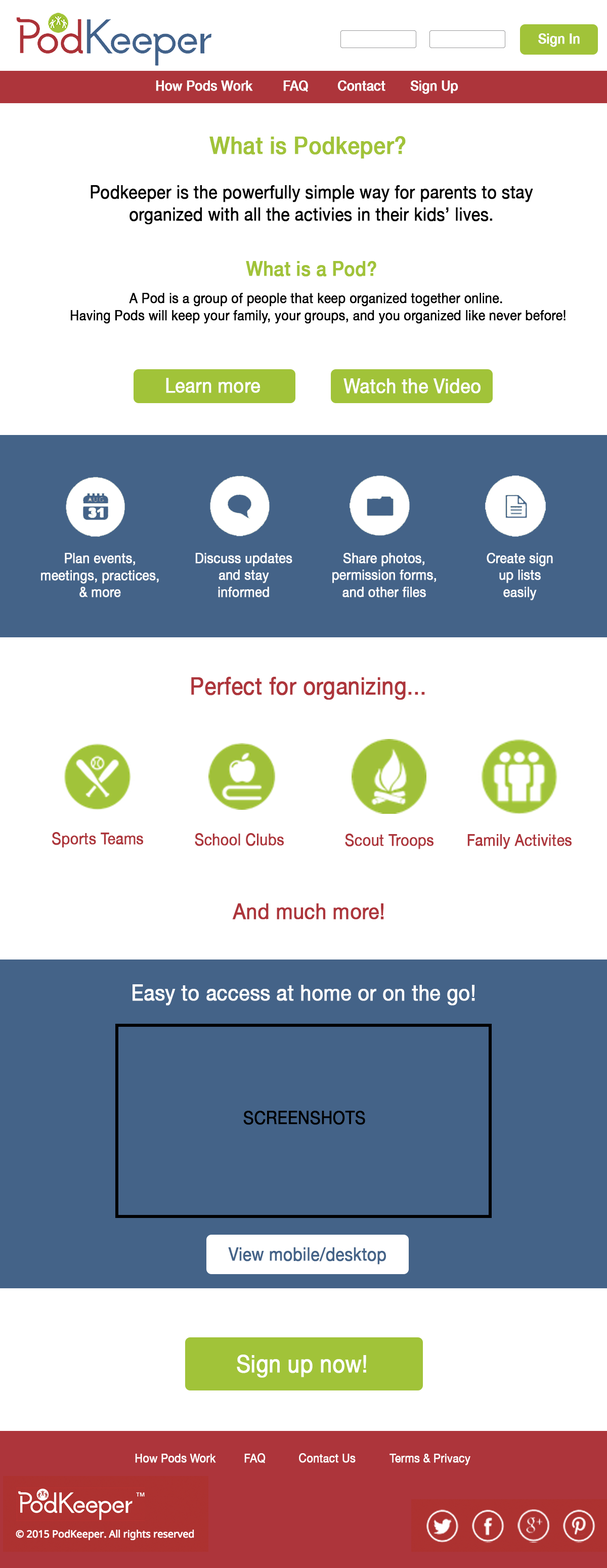
<style>
.page{position:relative;width:607px;height:1568px;background:#ffffff}
.page>*{position:absolute;margin:0}
.t1{font:14.2px "HelveticaNeue-Medium";color:#ffffff;font-weight:bold;scale:0.88 1}
.t2{font:24.3px "HelveticaNeue-Medium";color:#a1c339;font-weight:bold;scale:0.88 1}
.t3{font:18.2px "HelveticaNeue";color:#000000;font-weight:bold;scale:0.88 1}
.t4{font:20.2px "HelveticaNeue-Medium";color:#a1c339;font-weight:bold;scale:0.88 1}
.t5{font:14.2px "HelveticaNeue";color:#000000;font-weight:bold;scale:0.88 1}
.t6{font:20.2px "HelveticaNeue";color:#ffffff;font-weight:bold;scale:0.88 1}
.t7{font:14.2px "HelveticaNeue";color:#ffffff;font-weight:bold;scale:0.88 1}
.t8{font:24.3px "HelveticaNeue";color:#ad353b;font-weight:bold;scale:0.88 1}
.t9{font:16.2px "HelveticaNeue";color:#ad353b;font-weight:bold;scale:0.88 1}
.t10{font:22.3px "HelveticaNeue";color:#ad353b;font-weight:bold;scale:0.88 1}
.t11{font:22.3px "HelveticaNeue";color:#ffffff;font-weight:bold;scale:0.88 1}
.t12{font:18.2px "HelveticaNeue";color:#446388;font-weight:bold;scale:0.88 1}
.t13{font:24.3px "HelveticaNeue";color:#ffffff;font-weight:bold;scale:0.88 1}
.t14{font:12.1px "HelveticaNeue";color:#ffffff;font-weight:bold;scale:0.88 1}
</style>
<div class="page">
<p class="t1" style="left:538px;top:33px;width:42px;height:14px">Sign In</p>
<p class="t1" style="left:156px;top:80px;width:302px;height:14px">How Pods Work  FAQ  Contact  Sign Up</p>
<p class="t2" style="left:209px;top:136px;width:197px;height:23px">What is Podkeper?</p>
<p class="t3" style="left:91px;top:185px;width:442px;height:40px;text-align:center">Podkeeper is the powerfully simple way for parents to stay<br>organized with all the activies in their kids’ lives.</p>
<p class="t4" style="left:246px;top:261px;width:130px;height:16px">What is a Pod?</p>
<p class="t5" style="left:70px;top:293px;width:495px;height:31px;text-align:center">A Pod is a group of people that keep organized together online. <br>Having Pods will keep your family, your groups, and you organized like never before!</p>
<p class="t6" style="left:166px;top:378px;width:94px;height:15px">Learn more</p>
<p class="t6" style="left:343px;top:378px;width:138px;height:16px">Watch the Video</p>
<p class="t7" style="left:41px;top:553px;width:118px;height:44px;text-align:center">Plan events,<br>meetings, practices,<br>&amp; more</p>
<p class="t7" style="left:195px;top:553px;width:97px;height:44px;text-align:center">Discuss updates<br>and stay<br>informed</p>
<p class="t7" style="left:332px;top:553px;width:104px;height:44px;text-align:center">Share photos,<br>permission forms,<br>and other files</p>
<p class="t7" style="left:487px;top:553px;width:66px;height:47px;text-align:center">Create sign<br>up lists<br>easily</p>
<p class="t8" style="left:191px;top:677px;width:234px;height:23px">Perfect for organizing...</p>
<p class="t9" style="left:52px;top:832px;width:91px;height:16px">Sports Teams</p>
<p class="t9" style="left:195px;top:833px;width:89px;height:13px">School Clubs</p>
<p class="t9" style="left:345px;top:834px;width:88px;height:15px">Scout Troops</p>
<p class="t9" style="left:467px;top:834px;width:105px;height:15px">Family Activites</p>
<p class="t10" style="left:232px;top:903px;width:152px;height:17px">And much more!</p>
<p class="t11" style="left:133px;top:984px;width:342px;height:22px">Easy to access at home or on the go!</p>
<p class="t3" style="left:243px;top:1111px;width:122px;height:14px">SCREENSHOTS</p>
<p class="t12" style="left:228px;top:1247px;width:158px;height:18px">View mobile/desktop</p>
<p class="t13" style="left:237px;top:1355px;width:129px;height:23px">Sign up now!</p>
<p class="t14" style="left:135px;top:1453px;width:335px;height:12px">How Pods Work  FAQ  Contact Us  Terms &amp; Privacy</p>
</div>
